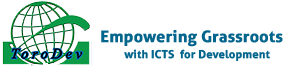
<style>
.page{position:relative;width:291px;height:80px;background:#ffffff}
.page>*{position:absolute;margin:0}
.t1{font:16px "Aller-Bold";color:#03658c;font-weight:bold}
.t2{font:11px "Aller-Bold";color:#03658c;font-weight:bold}
</style>
<div class="page">
<p class="t1" style="left:101px;top:30px;width:182px;height:17px">Empowering Grassroots</p>
<p class="t2" style="left:124px;top:49px;width:146px;height:13px">with ICTS  for Development</p>
</div>
